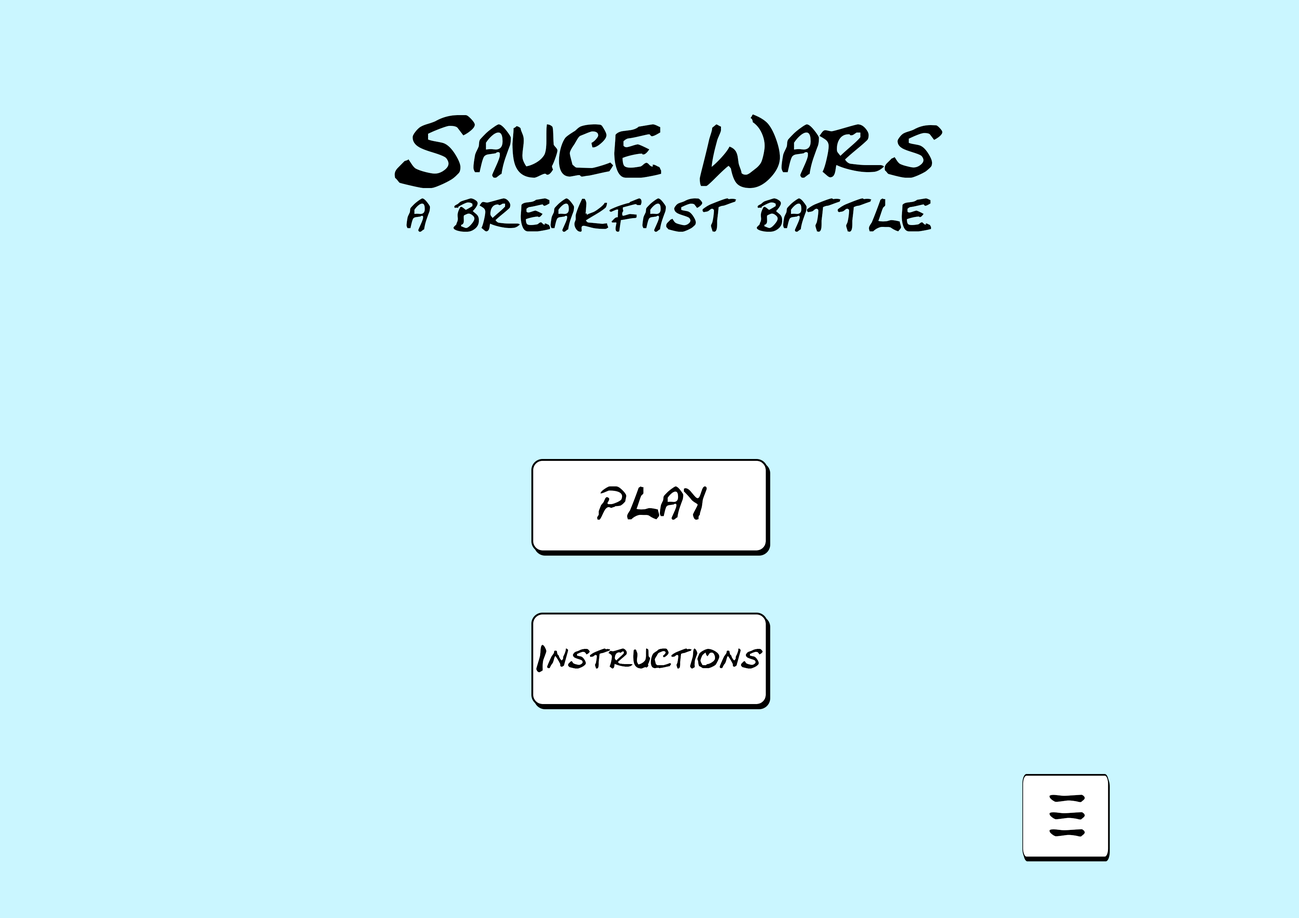
<style>
.page{position:relative;width:1299px;height:918px;background:#caf6ff}
.page>*{position:absolute;margin:0}
.t1{font:74px "CrackedJohnnie";color:#000000}
.t2{font:46.3px "CrackedJohnnie";color:#000000}
.t3{font:27.8px "CrackedJohnnie";color:#000000}
</style>
<div class="page">
<p class="t1" style="left:394px;top:114px;width:548px;height:74px">Sauce Wars</p>
<p class="t2" style="left:407px;top:198px;width:524px;height:34px">a breakfast battle</p>
<p class="t2" style="left:597px;top:486px;width:110px;height:34px">play</p>
<p class="t3" style="left:536px;top:645px;width:227px;height:27px">Instructions</p>
<p class="t2" style="left:1049px;top:795px;width:36px;height:7px;rotate:-67deg">\</p>
<p class="t2" style="left:1049px;top:812px;width:36px;height:8px;rotate:-67deg">\</p>
<p class="t2" style="left:1049px;top:829px;width:36px;height:8px;rotate:-67deg">\</p>
</div>
